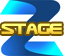
<style>
.page{position:relative;width:64px;height:56px}
.page>*{position:absolute;margin:0}
.t1{font:18px "Usuzi";letter-spacing:-0.08em}
</style>
<div class="page">
<p class="t1" style="left:1px;top:23px;width:61px;height:11px">Stage</p>
</div>
